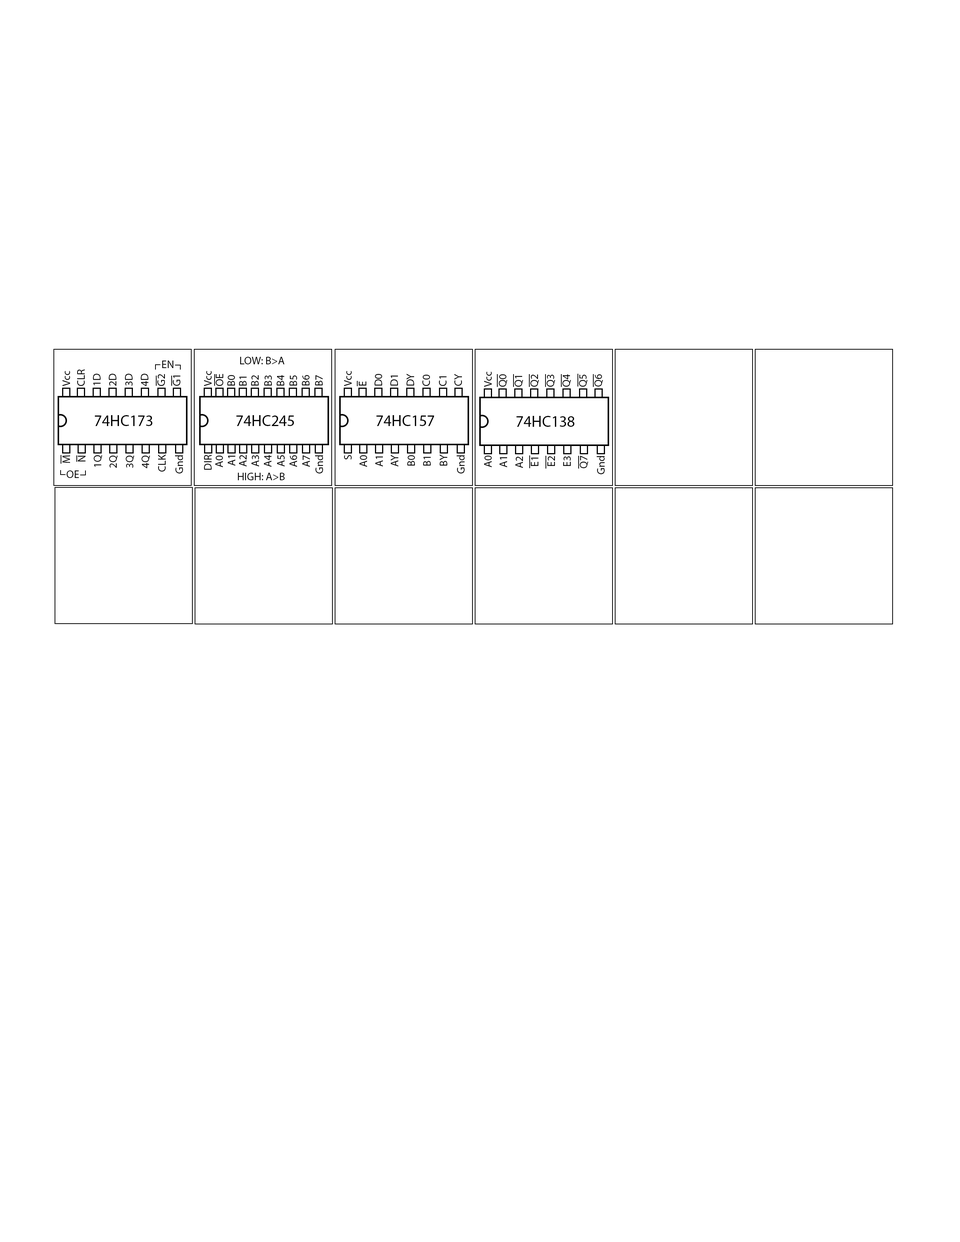
<style>
.page{position:relative;width:960px;height:1242px;background:#ffffff}
.page>*{position:absolute;margin:0}
.t1{font:11px "MyriadPro-Regular";color:#000000}
.t2{font:15.7px "MyriadPro-Regular";color:#000000}
</style>
<div class="page">
<p class="t1" style="left:162px;top:361px;width:12px;height:7px">EN</p>
<p class="t1" style="left:240px;top:357px;width:45px;height:7px">LOW: B&gt;A</p>
<p class="t1" style="left:62px;top:371px;width:8px;height:15px;rotate:-90deg">Vcc</p>
<p class="t1" style="left:77px;top:369px;width:8px;height:17px;rotate:-90deg">CLR</p>
<p class="t1" style="left:93px;top:374px;width:8px;height:11px;rotate:-90deg">1D</p>
<p class="t1" style="left:109px;top:374px;width:7px;height:12px;rotate:-90deg">2D</p>
<p class="t1" style="left:125px;top:374px;width:8px;height:12px;rotate:-90deg">3D</p>
<p class="t1" style="left:141px;top:374px;width:7px;height:12px;rotate:-90deg">4D</p>
<p class="t1" style="left:157px;top:374px;width:8px;height:12px;rotate:-90deg">G2</p>
<p class="t1" style="left:173px;top:376px;width:7px;height:10px;rotate:-90deg">G1</p>
<p class="t1" style="left:204px;top:371px;width:8px;height:15px;rotate:-90deg">Vcc</p>
<p class="t1" style="left:216px;top:374px;width:7px;height:12px;rotate:-90deg">OE</p>
<p class="t1" style="left:227px;top:375px;width:8px;height:11px;rotate:-90deg">B0</p>
<p class="t1" style="left:239px;top:377px;width:8px;height:9px;rotate:-90deg">B1</p>
<p class="t1" style="left:251px;top:375px;width:8px;height:11px;rotate:-90deg">B2</p>
<p class="t1" style="left:264px;top:375px;width:8px;height:11px;rotate:-90deg">B3</p>
<p class="t1" style="left:277px;top:375px;width:7px;height:11px;rotate:-90deg">B4</p>
<p class="t1" style="left:289px;top:375px;width:8px;height:11px;rotate:-90deg">B5</p>
<p class="t1" style="left:302px;top:375px;width:7px;height:10px;rotate:-90deg">B6</p>
<p class="t1" style="left:315px;top:375px;width:8px;height:10px;rotate:-90deg">B7</p>
<p class="t1" style="left:344px;top:371px;width:8px;height:15px;rotate:-90deg">Vcc</p>
<p class="t1" style="left:375px;top:374px;width:7px;height:12px;rotate:-90deg">D0</p>
<p class="t1" style="left:390px;top:376px;width:8px;height:10px;rotate:-90deg">D1</p>
<p class="t1" style="left:407px;top:374px;width:7px;height:12px;rotate:-90deg">DY</p>
<p class="t1" style="left:422px;top:375px;width:8px;height:11px;rotate:-90deg">C0</p>
<p class="t1" style="left:439px;top:376px;width:7px;height:10px;rotate:-90deg">C1</p>
<p class="t1" style="left:454px;top:374px;width:8px;height:12px;rotate:-90deg">CY</p>
<p class="t1" style="left:484px;top:372px;width:8px;height:15px;rotate:-90deg">Vcc</p>
<p class="t1" style="left:499px;top:374px;width:8px;height:13px;rotate:-90deg">Q0</p>
<p class="t1" style="left:515px;top:376px;width:8px;height:11px;rotate:-90deg">Q1</p>
<p class="t1" style="left:530px;top:375px;width:9px;height:12px;rotate:-90deg">Q2</p>
<p class="t1" style="left:547px;top:375px;width:8px;height:12px;rotate:-90deg">Q3</p>
<p class="t1" style="left:562px;top:374px;width:9px;height:13px;rotate:-90deg">Q4</p>
<p class="t1" style="left:579px;top:375px;width:9px;height:12px;rotate:-90deg">Q5</p>
<p class="t1" style="left:594px;top:374px;width:9px;height:13px;rotate:-90deg">Q6</p>
<p class="t1" style="left:359px;top:381px;width:7px;height:5px;rotate:-90deg">E</p>
<p class="t2" style="left:95px;top:415px;width:57px;height:11px">74HC173</p>
<p class="t2" style="left:236px;top:415px;width:58px;height:11px">74HC245</p>
<p class="t2" style="left:376px;top:415px;width:58px;height:11px">74HC157</p>
<p class="t2" style="left:516px;top:416px;width:58px;height:11px">74HC138</p>
<p class="t1" style="left:62px;top:455px;width:8px;height:8px;rotate:-90deg">M</p>
<p class="t1" style="left:78px;top:456px;width:7px;height:6px;rotate:-90deg">N</p>
<p class="t1" style="left:94px;top:455px;width:8px;height:12px;rotate:-90deg">1Q</p>
<p class="t1" style="left:109px;top:455px;width:9px;height:13px;rotate:-90deg">2Q</p>
<p class="t1" style="left:126px;top:455px;width:8px;height:13px;rotate:-90deg">3Q</p>
<p class="t1" style="left:142px;top:455px;width:8px;height:13px;rotate:-90deg">4Q</p>
<p class="t1" style="left:158px;top:454px;width:8px;height:18px;rotate:-90deg">CLK</p>
<p class="t1" style="left:175px;top:455px;width:8px;height:19px;rotate:-90deg">Gnd</p>
<p class="t1" style="left:204px;top:455px;width:8px;height:15px;rotate:-90deg">DIR</p>
<p class="t1" style="left:215px;top:455px;width:8px;height:13px;rotate:-90deg">A0</p>
<p class="t1" style="left:228px;top:456px;width:7px;height:10px;rotate:-90deg">A1</p>
<p class="t1" style="left:239px;top:455px;width:8px;height:12px;rotate:-90deg">A2</p>
<p class="t1" style="left:251px;top:455px;width:8px;height:12px;rotate:-90deg">A3</p>
<p class="t1" style="left:264px;top:455px;width:7px;height:12px;rotate:-90deg">A4</p>
<p class="t1" style="left:277px;top:455px;width:8px;height:12px;rotate:-90deg">A5</p>
<p class="t1" style="left:289px;top:455px;width:8px;height:12px;rotate:-90deg">A6</p>
<p class="t1" style="left:302px;top:455px;width:8px;height:12px;rotate:-90deg">A7</p>
<p class="t1" style="left:315px;top:455px;width:8px;height:19px;rotate:-90deg">Gnd</p>
<p class="t1" style="left:344px;top:455px;width:8px;height:5px;rotate:-90deg">S</p>
<p class="t1" style="left:359px;top:455px;width:8px;height:12px;rotate:-90deg">A0</p>
<p class="t1" style="left:375px;top:457px;width:8px;height:10px;rotate:-90deg">A1</p>
<p class="t1" style="left:391px;top:455px;width:7px;height:12px;rotate:-90deg">AY</p>
<p class="t1" style="left:407px;top:455px;width:8px;height:11px;rotate:-90deg">B0</p>
<p class="t1" style="left:423px;top:457px;width:8px;height:9px;rotate:-90deg">B1</p>
<p class="t1" style="left:440px;top:454px;width:7px;height:12px;rotate:-90deg">BY</p>
<p class="t1" style="left:457px;top:455px;width:8px;height:19px;rotate:-90deg">Gnd</p>
<p class="t1" style="left:484px;top:455px;width:8px;height:13px;rotate:-90deg">A0</p>
<p class="t1" style="left:500px;top:457px;width:7px;height:11px;rotate:-90deg">A1</p>
<p class="t1" style="left:515px;top:457px;width:8px;height:11px;rotate:-90deg">A2</p>
<p class="t1" style="left:531px;top:458px;width:7px;height:8px;rotate:-90deg">E1</p>
<p class="t1" style="left:547px;top:456px;width:8px;height:10px;rotate:-90deg">E2</p>
<p class="t1" style="left:563px;top:456px;width:8px;height:10px;rotate:-90deg">E3</p>
<p class="t1" style="left:580px;top:456px;width:8px;height:12px;rotate:-90deg">Q7</p>
<p class="t1" style="left:597px;top:456px;width:8px;height:18px;rotate:-90deg">Gnd</p>
<p class="t1" style="left:67px;top:471px;width:12px;height:7px">OE</p>
<p class="t1" style="left:238px;top:473px;width:47px;height:7px">HIGH: A&gt;B</p>
</div>
